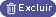
<style>
.page{position:relative;width:56px;height:17px;background:#525297}
.page>*{position:absolute;margin:0}
.t1{font:8.5px "Verdana";letter-spacing:0.1em;color:#ffffff}
</style>
<div class="page">
<p class="t1" style="left:19px;top:4px;width:33px;height:7px">Excluir</p>
</div>
